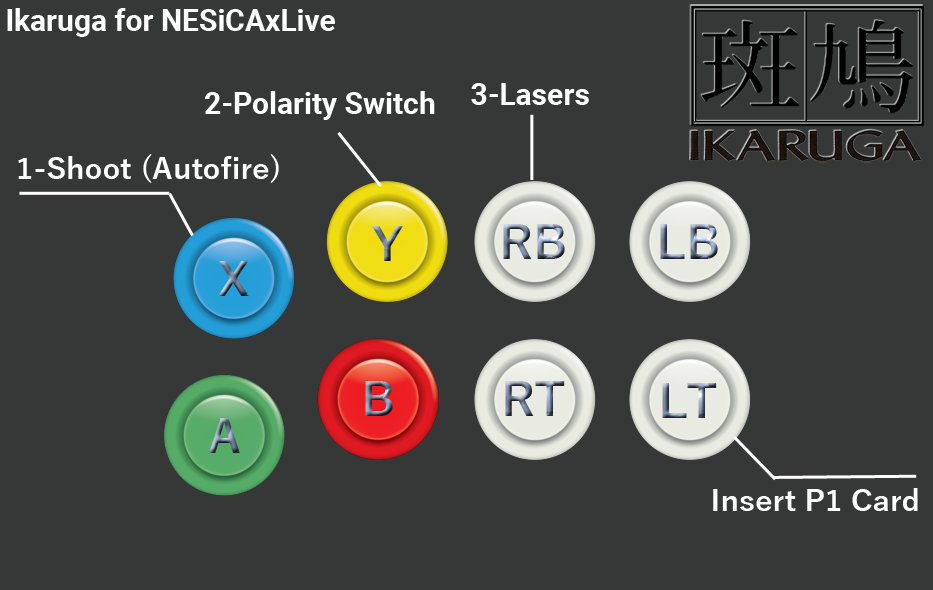
<style>
.page{position:relative;width:933px;height:590px;background:#363838}
.page>*{position:absolute;margin:0}
.t1{font:30px "Roboto-Bold";color:#ffffff}
.t2{font:30px "YuGothic-Bold";color:#ffffff}
</style>
<div class="page">
<p class="t1" style="left:7px;top:8px;width:328px;height:29px">Ikaruga for NESiCAxLive</p>
<p class="t1" style="left:471px;top:83px;width:118px;height:22px">3-Lasers</p>
<p class="t1" style="left:205px;top:91px;width:230px;height:29px">2-Polarity Switch</p>
<p class="t2" style="left:18px;top:154px;width:261px;height:29px">1-Shoot (Autofire)</p>
<p class="t2" style="left:713px;top:488px;width:205px;height:23px">Insert P1 Card</p>
</div>
